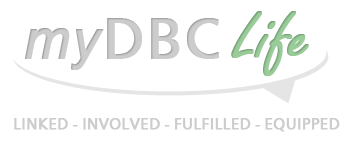
<style>
.page{position:relative;width:352px;height:144px;background:#ffffff}
.page>*{position:absolute;margin:0}
.t1{font:72px "FreestyleScript-Regular";color:#99cc99;font-weight:bold}
.t2{font:60px "CartoGothicStd-Book";letter-spacing:0.025em;color:#cccccc;font-weight:bold}
.t3{font:55px "Arial-ItalicMT";letter-spacing:0.025em;color:#cccccc;font-weight:bold}
.t4{font:16px "CartoGothicStd-Book";color:#cccccc;text-transform:uppercase;font-weight:bold}
</style>
<div class="page">
<p class="t1" style="left:231px;top:11px;width:78px;height:65px">Life</p>
<p class="t2" style="left:25px;top:18px;width:194px;height:52px"><span class="t3">my</span>DBC</p>
<p class="t4" style="left:14px;top:118px;width:326px;height:14px">linked - involved - fulfilled - equipped</p>
</div>
